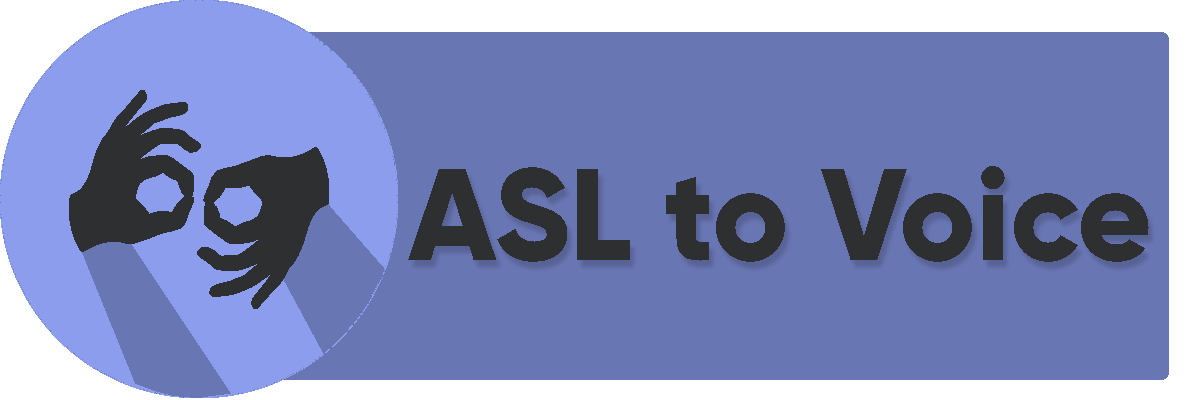
<style>
.page{position:relative;width:1200px;height:400px;background:#6976b4}
.page>*{position:absolute;margin:0}
.t1{font:130px "Gilroy-ExtraBold";color:#2d2f31}
</style>
<div class="page">
<p class="t1" style="left:408px;top:166px;width:741px;height:96px">ASL to Voice</p>
</div>
